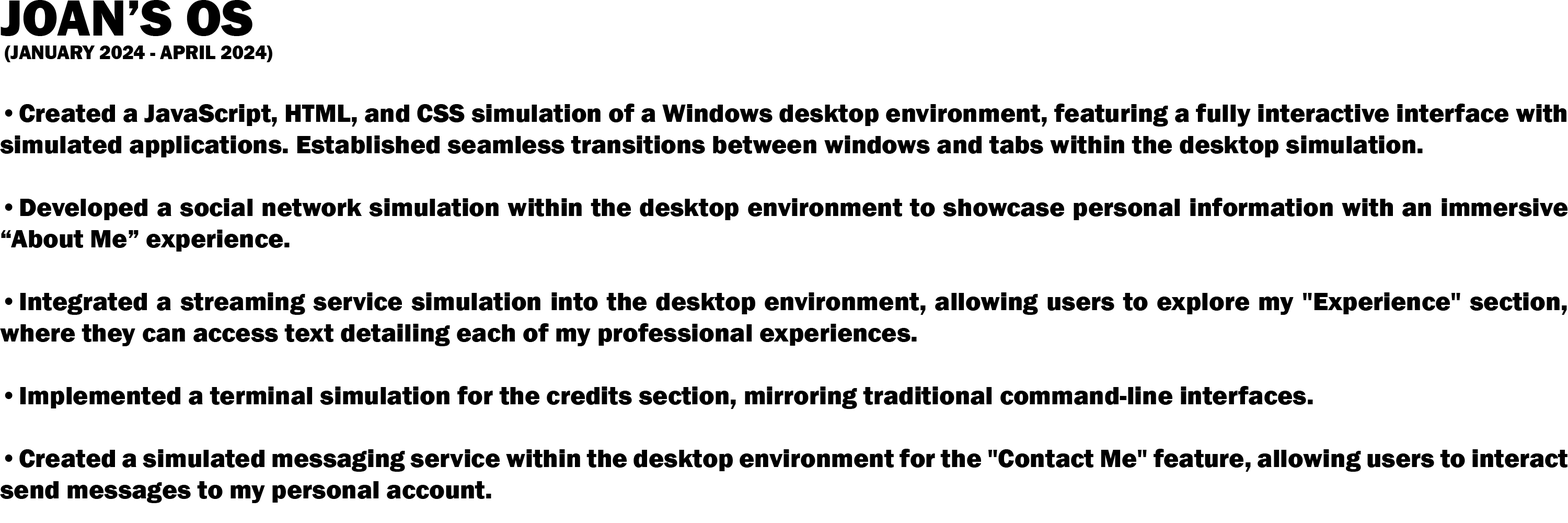
<style>
.page{position:relative;width:1568px;height:523px;background:#ffffff}
.page>*{position:absolute;margin:0}
.t1{font:26.1px "FranklinGothic-Heavy";color:#000000}
.t2{font:52.3px "FranklinGothic-Heavy";color:#000000}
.t3{font:19.6px "FranklinGothic-Heavy";color:#000000}
</style>
<div class="page">
<p class="t1" style="left:0px;top:0px;width:1567px;height:503px"><span class="t2">JOAN’S OS<br></span><span class="t3"> (JANUARY 2024 - APRIL 2024)<br></span><br>• Created a JavaScript, HTML, and CSS simulation of a Windows desktop environment, featuring a fully interactive interface with simulated applications. Established seamless transitions between windows and tabs within the desktop simulation.<br><br>• Developed a social network simulation within the desktop environment to showcase personal information with an immersive “About Me” experience.<br><br>• Integrated a streaming service simulation into the desktop environment, allowing users to explore my "Experience" section, where they can access text detailing each of my professional experiences.<br><br>• Implemented a terminal simulation for the credits section, mirroring traditional command-line interfaces.<br><br>• Created a simulated messaging service within the desktop environment for the "Contact Me" feature, allowing users to interact send messages to my personal account.</p>
</div>
